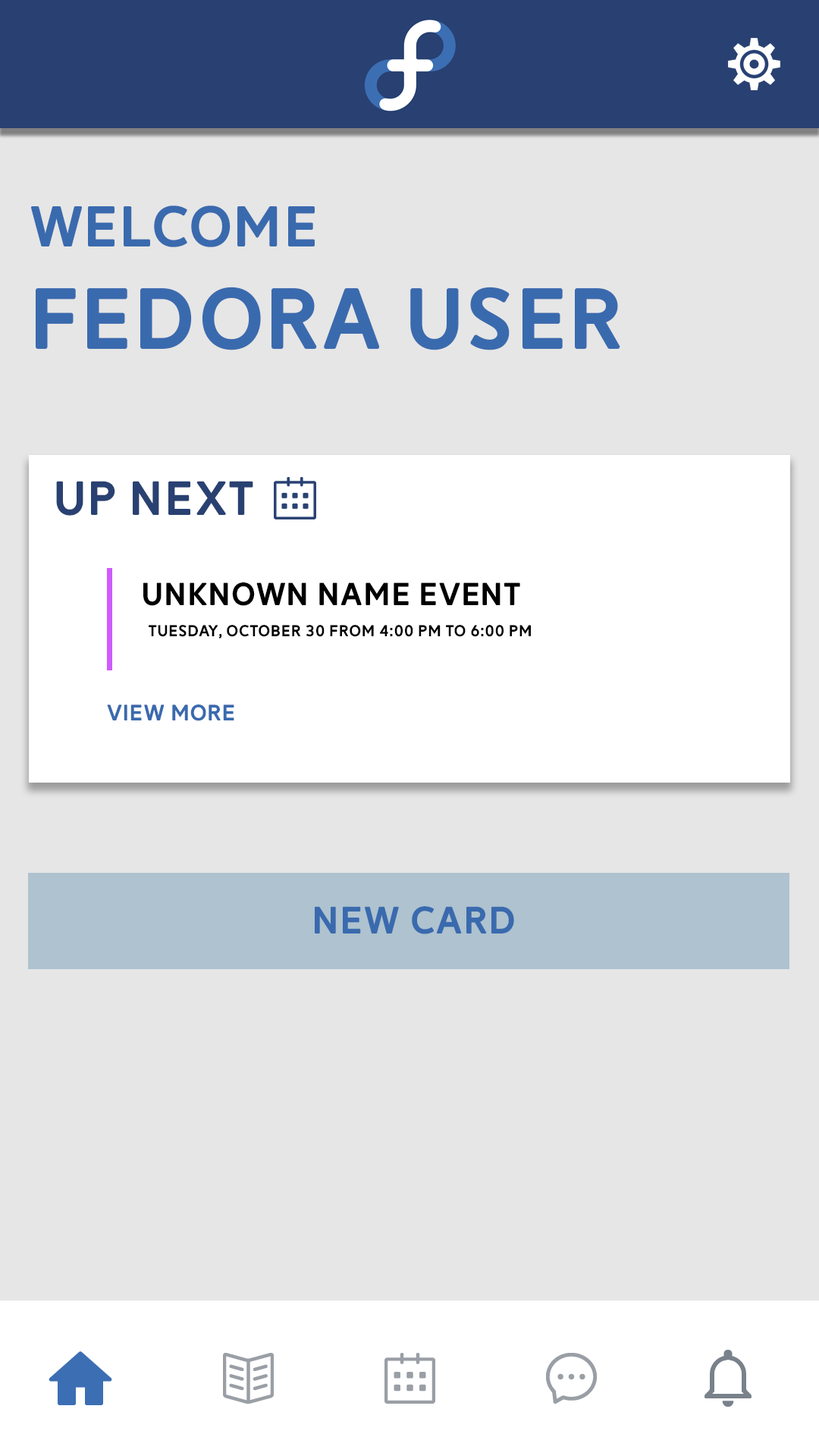
<style>
.page{position:relative;width:819px;height:1456px;background:#e6e6e6}
.page>*{position:absolute;margin:0}
.t1{font:85.3px "Reitam";color:#3a6aae}
.t2{font:56.9px "Reitam";color:#3a6aae}
.t3{font:47.4px "Reitam";color:#294172}
.t4{font:31.6px "Reitam";color:#000000}
.t5{font:15.8px "Reitam";color:#000000}
.t6{font:22.1px "Reitam";color:#3a6aae}
.t7{font:37.9px "Reitam";color:#3a6aae}
</style>
<div class="page">
<p class="t1" style="left:31px;top:206px;width:589px;height:144px"><span class="t2">Welcome<br></span>FEDORA USER</p>
<p class="t3" style="left:56px;top:481px;width:197px;height:35px">Up next</p>
<p class="t4" style="left:143px;top:582px;width:377px;height:24px">UNKNOWN NAME Event</p>
<p class="t5" style="left:149px;top:625px;width:382px;height:14px">Tuesday, October 30 from 4:00 PM to 6:00 PM</p>
<p class="t6" style="left:107px;top:704px;width:127px;height:17px">view more</p>
<p class="t7" style="left:315px;top:906px;width:199px;height:28px">NEW CARD</p>
</div>
